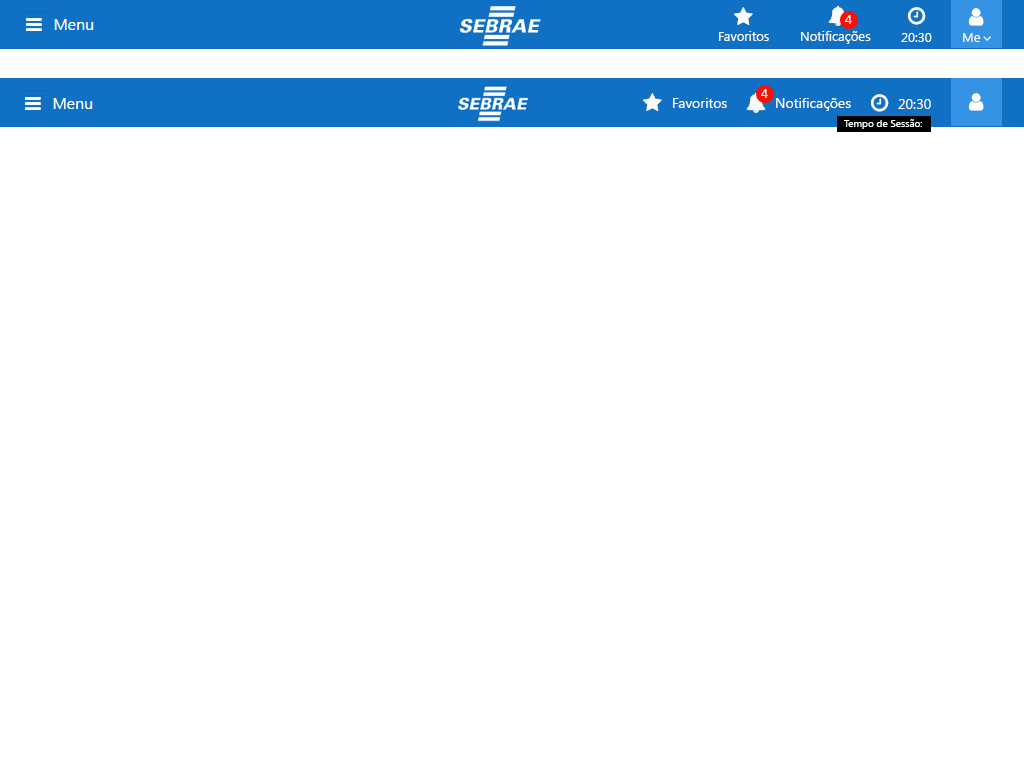
<style>
.page{position:relative;width:1024px;height:768px;background:#ffffff}
.page>*{position:absolute;margin:0}
.t1{font:13px "SegoeUI";color:#ffffff}
.t2{font:14px "SegoeUI";color:#ffffff}
.t3{font:10px "SegoeUI";color:#ffffff}
</style>
<div class="page">
<p class="t1" style="left:845px;top:15px;width:7px;height:9px">4</p>
<p class="t1" style="left:719px;top:31px;width:50px;height:10px">Favoritos</p>
<p class="t1" style="left:801px;top:31px;width:70px;height:13px">Notificações</p>
<p class="t1" style="left:901px;top:33px;width:31px;height:9px">20:30</p>
<p class="t1" style="left:963px;top:33px;width:18px;height:9px">Me</p>
<p class="t1" style="left:761px;top:89px;width:7px;height:9px">4</p>
<p class="t2" style="left:673px;top:98px;width:54px;height:10px">Favoritos</p>
<p class="t2" style="left:776px;top:98px;width:75px;height:13px">Notificações</p>
<p class="t2" style="left:898px;top:99px;width:33px;height:10px">20:30</p>
<p class="t3" style="left:844px;top:119px;width:78px;height:10px">Tempo de Sessão:</p>
</div>
